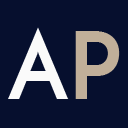
<style>
.page{position:relative;width:128px;height:128px;background:#060f2e}
.page>*{position:absolute;margin:0}
.t1{font:91.7px "JosefinSans-Bold";color:#fafafa}
.t2{font:91.7px "JosefinSans-Bold";color:#c1af99}
</style>
<div class="page">
<p class="t1" style="left:8px;top:27px;width:112px;height:72px">A<span class="t2">P</span></p>
</div>
